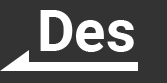
<style>
.page{position:relative;width:167px;height:83px;background:#333333}
.page>*{position:absolute;margin:0}
.t1{font:58.3px "Roboto-Bold";color:#ffffff}
</style>
<div class="page">
<p class="t1" style="left:40px;top:10px;width:94px;height:42px">Des</p>
</div>
